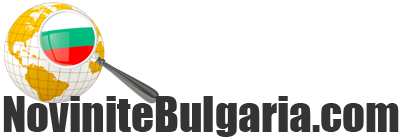
<style>
.page{position:relative;width:400px;height:140px;background:#ffffff}
.page>*{position:absolute;margin:0}
.t1{font:45px "Impact";color:#343434}
</style>
<div class="page">
<p class="t1" style="left:3px;top:96px;width:396px;height:41px">NoviniteBulgaria.com</p>
</div>
